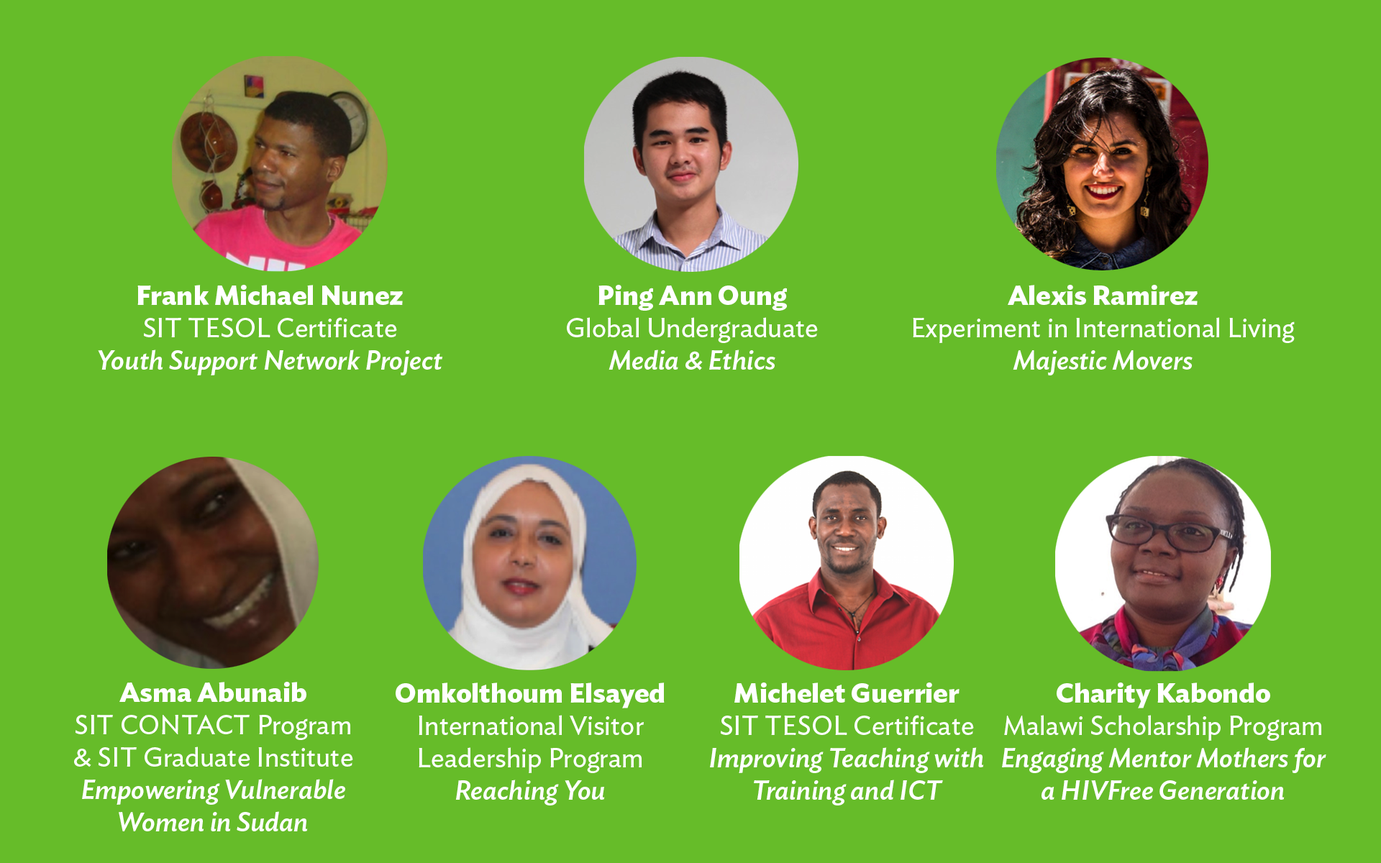
<style>
.page{position:relative;width:1381px;height:863px;background:#66bc29}
.page>*{position:absolute;margin:0}
.t1{font:27px "IdealSans-MediumItalic";color:#ffffff}
.t2{font:27px "IdealSans-Bold";color:#ffffff}
.t3{font:27px "IdealSans-Book";color:#ffffff}
</style>
<div class="page">
<p class="t1" style="left:98px;top:285px;width:345px;height:91px;text-align:center"><span class="t2">Frank Michael Nunez <br></span><span class="t3">SIT TESOL Certificate<br></span>Youth Support Network Project</p>
<p class="t3" style="left:567px;top:285px;width:251px;height:85px;text-align:center"><span class="t2">Ping Ann Oung <br></span>Global Undergraduate<br><span class="t1">Media &amp; Ethics</span></p>
<p class="t3" style="left:913px;top:285px;width:382px;height:91px;text-align:center"><span class="t2">Alexis Ramirez <br></span>Experiment in International Living<br><span class="t1">Majestic Movers</span></p>
<p class="t3" style="left:74px;top:682px;width:279px;height:150px;text-align:center"><span class="t2">Asma Abunaib <br></span>SIT CONTACT Program <br>&amp; SIT Graduate Institute<br><span class="t1">Empowering Vulnerable <br>Women in Sudan</span></p>
<p class="t3" style="left:396px;top:683px;width:269px;height:123px;text-align:center"><span class="t2">Omkolthoum Elsayed <br></span>International Visitor<br>Leadership Program<br><span class="t1">Reaching You</span></p>
<p class="t1" style="left:710px;top:683px;width:274px;height:123px;text-align:center"><span class="t2">Michelet Guerrier <br></span><span class="t3">SIT TESOL Certificate<br></span>Improving Teaching with <br>Training and ICT</p>
<p class="t1" style="left:1002px;top:683px;width:325px;height:117px;text-align:center"><span class="t2">Charity Kabondo <br></span><span class="t3">Malawi Scholarship Program<br></span>Engaging Mentor Mothers for <br>a HIVFree Generation</p>
</div>
